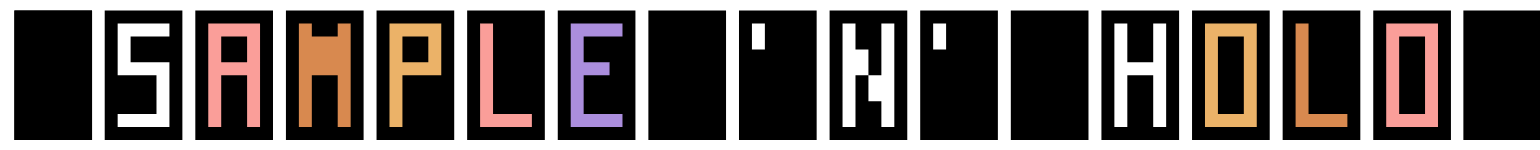
<style>
.page{position:relative;width:1540px;height:150px;background:#000000}
.page>*{position:absolute;margin:0}
.t1{font:103.6px "Anti-Digital";color:#000000}
</style>
<div class="page">
<p class="t1" style="left:104px;top:10px;width:1347px;height:130px">SAMPLE 'N' HOLD</p>
</div>
